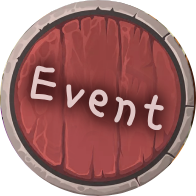
<style>
.page{position:relative;width:196px;height:196px;background:#ffffff}
.page>*{position:absolute;margin:0}
.t1{font:60px "SingleDay-Regular";letter-spacing:0.05em;color:#e0c6c5}
</style>
<div class="page">
<p class="t1" style="left:30px;top:65px;width:135px;height:66px;rotate:15deg">Event</p>
</div>
